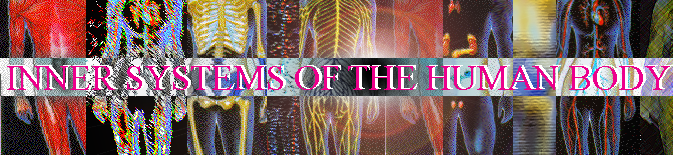
<style>
.page{position:relative;width:673px;height:155px}
.page>*{position:absolute;margin:0}
.t1{font:36px "TimesNewRomanPSMT";color:#ec008c}
</style>
<div class="page">
<p class="t1" style="left:7px;top:66px;width:663px;height:24px">INNER SYSTEMS OF THE HUMAN BODY</p>
</div>
